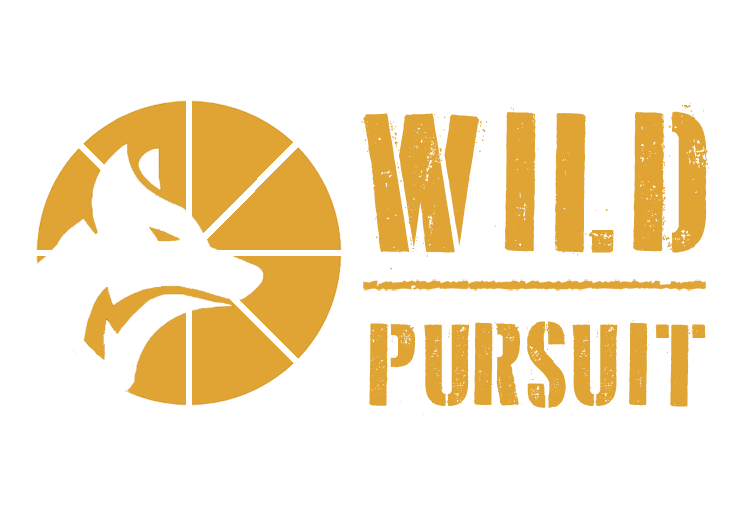
<style>
.page{position:relative;width:756px;height:506px;background:#ffffff}
.page>*{position:absolute;margin:0}
.t1{font:127.9px "DDayStencil";letter-spacing:0.025em;color:#dfa433}
.t2{font:216.2px "DDayStencil";letter-spacing:0.025em;color:#dfa433}
</style>
<div class="page">
<p class="t1" style="left:361px;top:103px;width:349px;height:312px;text-align:justify"><span class="t2">WILD<br></span>PURSUIT</p>
</div>
